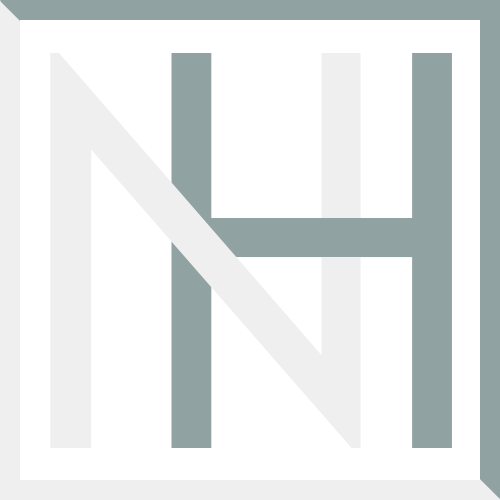
<style>
.page{position:relative;width:500px;height:500px;background:#ffffff}
.page>*{position:absolute;margin:0}
.t1{font:550px "CenturyGothic";color:#90a2a2}
</style>
<div class="page">
<p class="t1" style="left:171px;top:53px;width:281px;height:395px">H</p>
</div>
